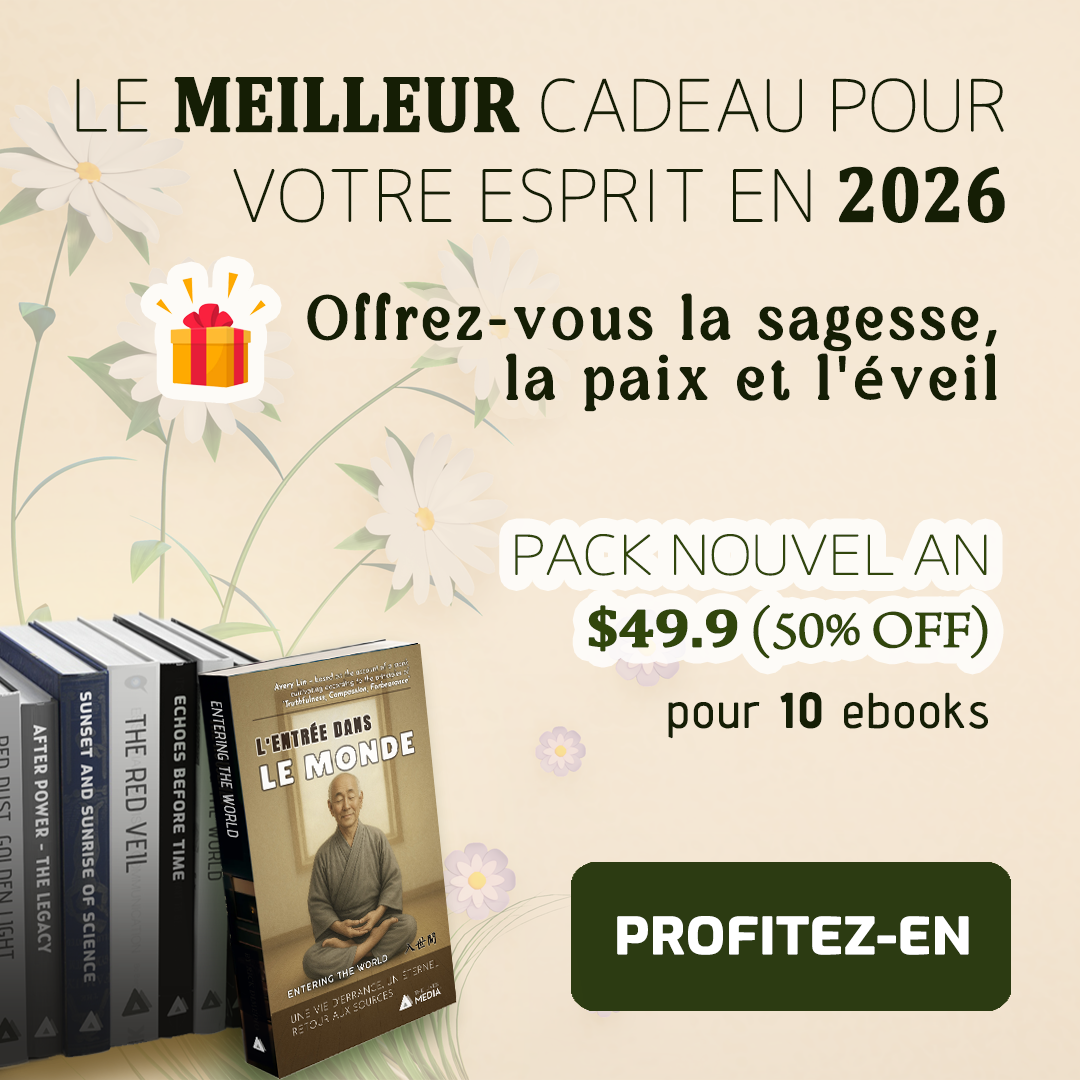
<style>
.page{position:relative;width:1080px;height:1080px}
.page>*{position:absolute;margin:0}
.t1{font:70.4px/90.2px "Chogokuboso-Gothic";letter-spacing:-0.01em;color:#151e05;font-weight:bold}
.t2{font:79.2px/90.2px "Cambria-Bold";letter-spacing:-0.01em;color:#151e05;font-weight:bold;scale:0.89 1}
.t3{font:60px/60px "AmadiBlurDemo-Regular";letter-spacing:0.075em;color:#151e05;font-weight:bold}
.t4{font:60px/60px "MyriadPro-Regular";letter-spacing:0.075em;color:#151e05;font-weight:bold}
.t5{font:54px/72px "Chogokuboso-Gothic";letter-spacing:-0.025em;color:#31460c;font-weight:bold;scale:1.11 1}
.t6{font:54px/72px "Cambria-Bold";letter-spacing:-0.025em;color:#31460c;font-weight:bold;scale:1.11 1}
.t7{font:54px/72px "ArnoPro-LightDisplay";letter-spacing:-0.025em;color:#31460c;font-weight:bold;scale:1.11 1}
.t8{font:48px "AdventPro-Regular";letter-spacing:0.05em;color:#151e05;font-weight:bold}
.t9{font:48px "AdventPro-Bold";letter-spacing:0.05em;color:#151e05;font-weight:bold}
.t10{font:49.5px "Exo-Bold";color:#ffffff;font-weight:bold;scale:1.11 1}
</style>
<div class="page">
<p class="t1" style="left:76px;top:77px;width:929px;height:146px;text-align:right">LE <span class="t2">MEILLEUR</span> CADEAU POUR VOTRE ESPRIT EN <span class="t2">2026</span></p>
<p class="t3" style="left:307px;top:292px;width:690px;height:120px;text-align:right">Offrez<span class="t4">-</span>vous la sagesse<span class="t4">,</span> <br>la paix et l<span class="t4">'é</span>veil</p>
<p class="t5" style="left:515px;top:534px;width:473px;height:125px;text-align:right">PACK NOUVEL AN<br> <span class="t6">$49.9</span><span class="t7"> (50% OFF)</span></p>
<p class="t8" style="left:668px;top:692px;width:320px;height:47px">pour <span class="t9">10</span> ebooks</p>
<p class="t10" style="left:617px;top:916px;width:352px;height:39px">PROFITEZ-EN</p>
</div>
